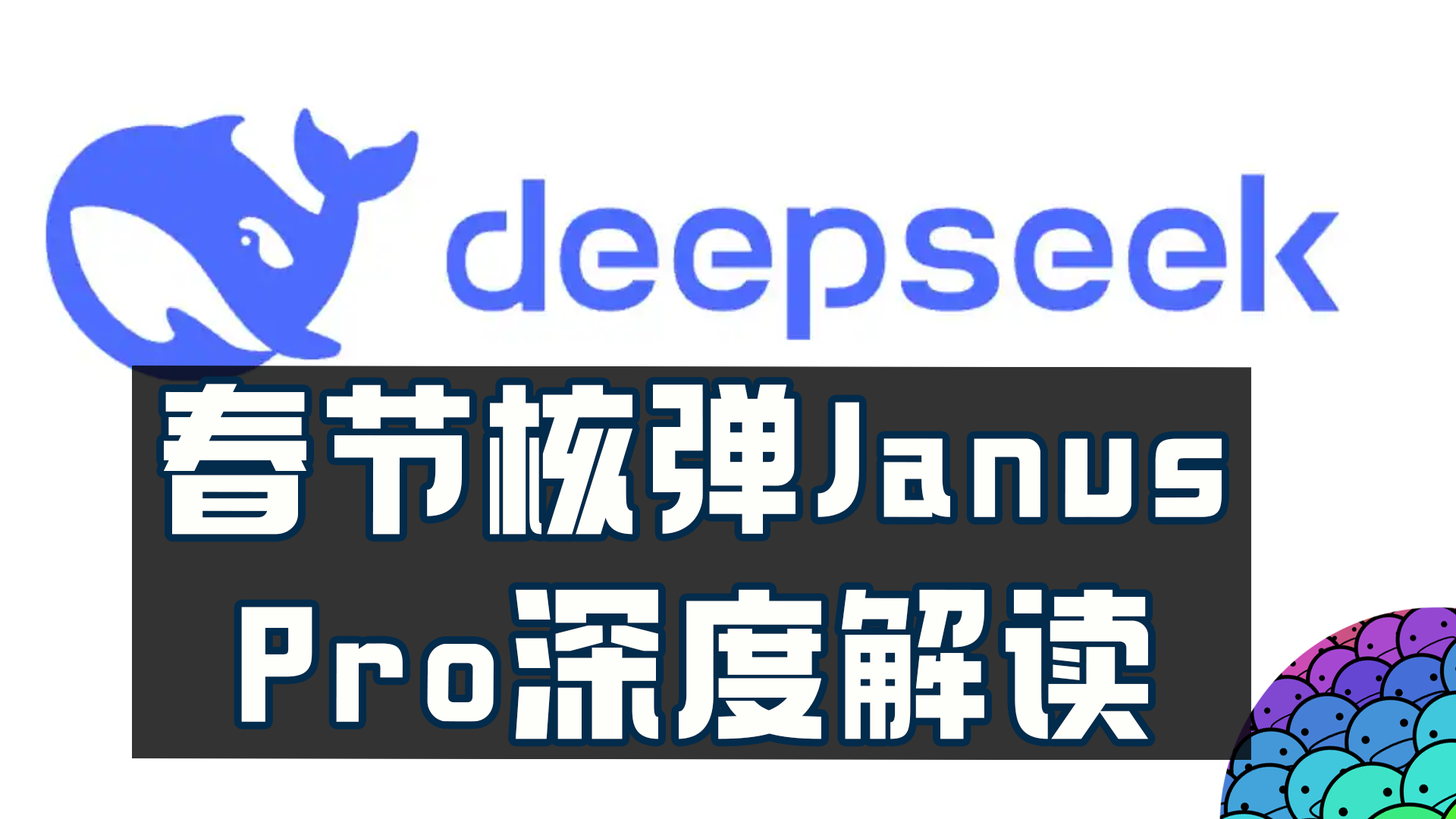
<style>
.page{position:relative;width:1456px;height:819px;background:#ffffff}
.page>*{position:absolute;margin:0}
.t1{font:166.8px/204.7px "098-";letter-spacing:0.05em;color:#fefffa}
</style>
<div class="page">
<p class="t1" style="left:164px;top:384px;width:1058px;height:355px;text-align:center">春节核弹Janus<br>Pro深度解读</p>
</div>
